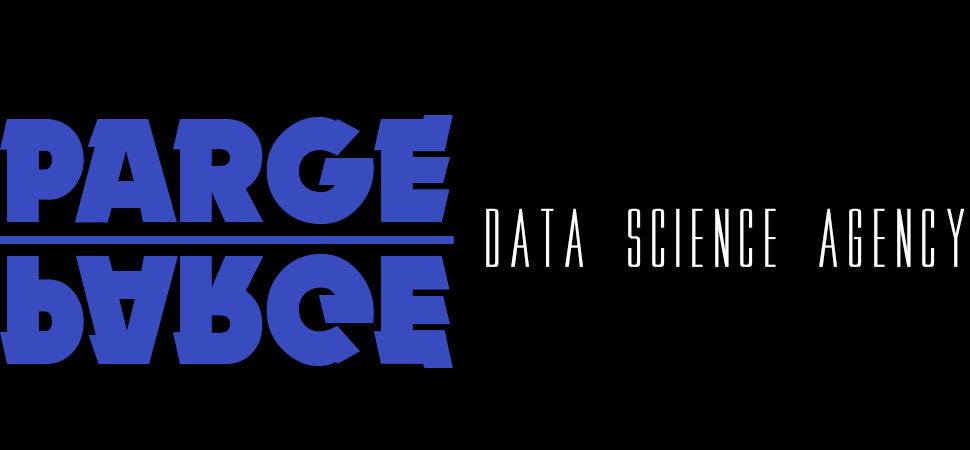
<style>
.page{position:relative;width:970px;height:450px;background:#000000}
.page>*{position:absolute;margin:0}
.t1{font:149.7px "Nougat-ExtraBlack";color:#384cc0}
.t2{font:83.5px "MovieLetters";color:#ffffff;scale:1.54 1}
.t3{font:158.2px "Nougat-ExtraBlack";color:#384cc0;scale:0.93 1}
</style>
<div class="page">
<p class="t1" style="left:0px;top:115px;width:453px;height:109px">PARGE</p>
<p class="t2" style="left:486px;top:208px;width:479px;height:59px">DATA SCIENCE AGENCY</p>
<p class="t3" style="left:0px;top:254px;width:453px;height:114px">PARGE</p>
</div>
